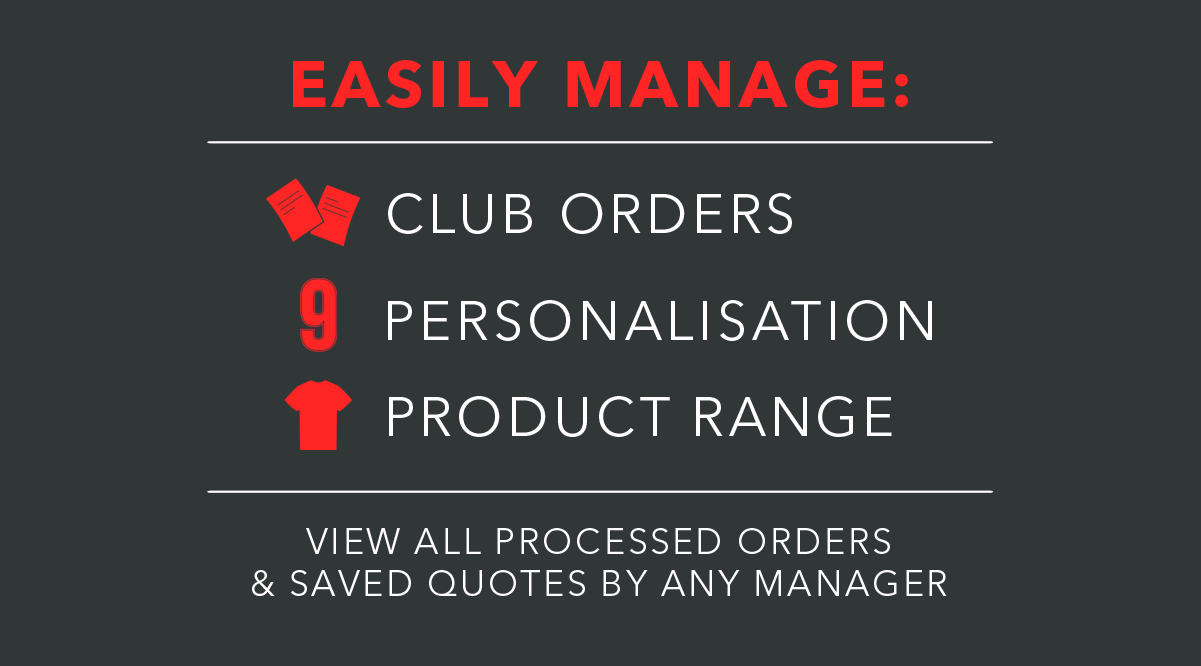
<style>
.page{position:relative;width:1201px;height:666px;background:#313737}
.page>*{position:absolute;margin:0}
.t1{font:65.4px "AvenirNextLTPro-Bold";letter-spacing:0.075em;color:#ff2525}
.t2{font:54.5px "AvenirNextLTPro-Regular";letter-spacing:0.075em;color:#ffffff}
.t3{font:35.7px "AvenirNextLTPro-Regular";letter-spacing:0.075em;color:#ffffff}
</style>
<div class="page">
<p class="t1" style="left:293px;top:60px;width:615px;height:48px">EASILY MANAGE:</p>
<p class="t2" style="left:388px;top:193px;width:404px;height:41px">CLUB ORDERS</p>
<p class="t2" style="left:388px;top:300px;width:544px;height:41px">PERSONALISATION</p>
<p class="t2" style="left:389px;top:396px;width:503px;height:41px">PRODUCT RANGE</p>
<p class="t3" style="left:252px;top:528px;width:695px;height:68px;text-align:center">VIEW ALL PROCESSED ORDERS <br>&amp; SAVED QUOTES BY ANY MANAGER</p>
</div>
